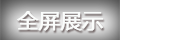
<style>
.page{position:relative;width:180px;height:40px;background:#ffffff}
.page>*{position:absolute;margin:0}
.t1{font:21px "MicrosoftYaHei";color:#fafcfb;font-weight:bold}
</style>
<div class="page">
<p class="t1" style="left:17px;top:11px;width:87px;height:20px">全屏展示</p>
</div>
